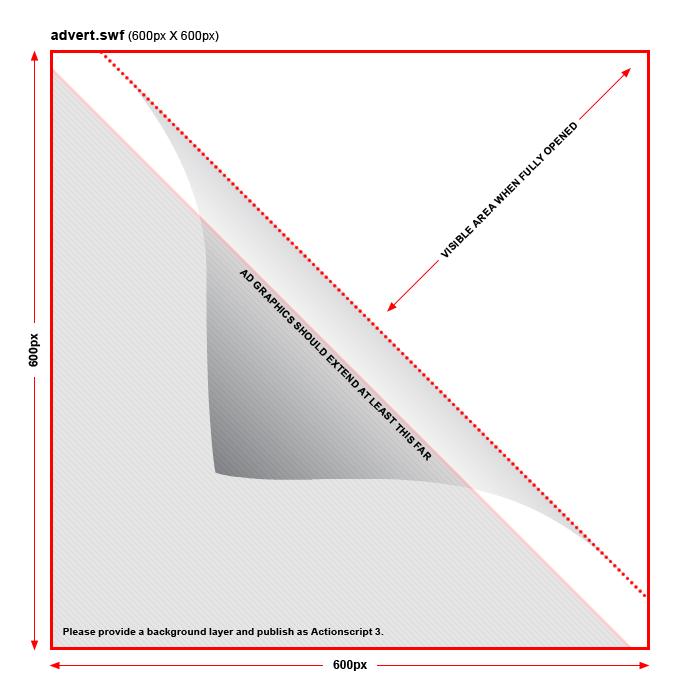
<style>
.page{position:relative;width:700px;height:700px;background:#ffffff}
.page>*{position:absolute;margin:0}
.t1{font:12px "ArialMT";color:#000000}
.t2{font:14px "Arial-BoldMT";color:#000000}
.t3{font:10px "Arial-BoldMT";color:#000000;text-transform:uppercase}
.t4{font:12px "Arial-BoldMT";color:#000000}
.t5{font:10px "Arial-BoldMT";color:#000000}
</style>
<div class="page">
<p class="t1" style="left:51px;top:30px;width:168px;height:12px"><span class="t2">advert.swf </span>(600px X 600px)</p>
<p class="t3" style="left:440px;top:122px;width:137px;height:136px;rotate:-45deg">Visible area when fully opened</p>
<p class="t3" style="left:239px;top:269px;width:193px;height:192px;rotate:45deg">Ad graphics should extend at least this far</p>
<p class="t4" style="left:28px;top:333px;width:13px;height:34px;rotate:-90deg">600px</p>
<p class="t5" style="left:63px;top:628px;width:321px;height:9px">Please provide a background layer and publish as Actionscript 3.</p>
<p class="t4" style="left:333px;top:660px;width:34px;height:11px">600px</p>
</div>
